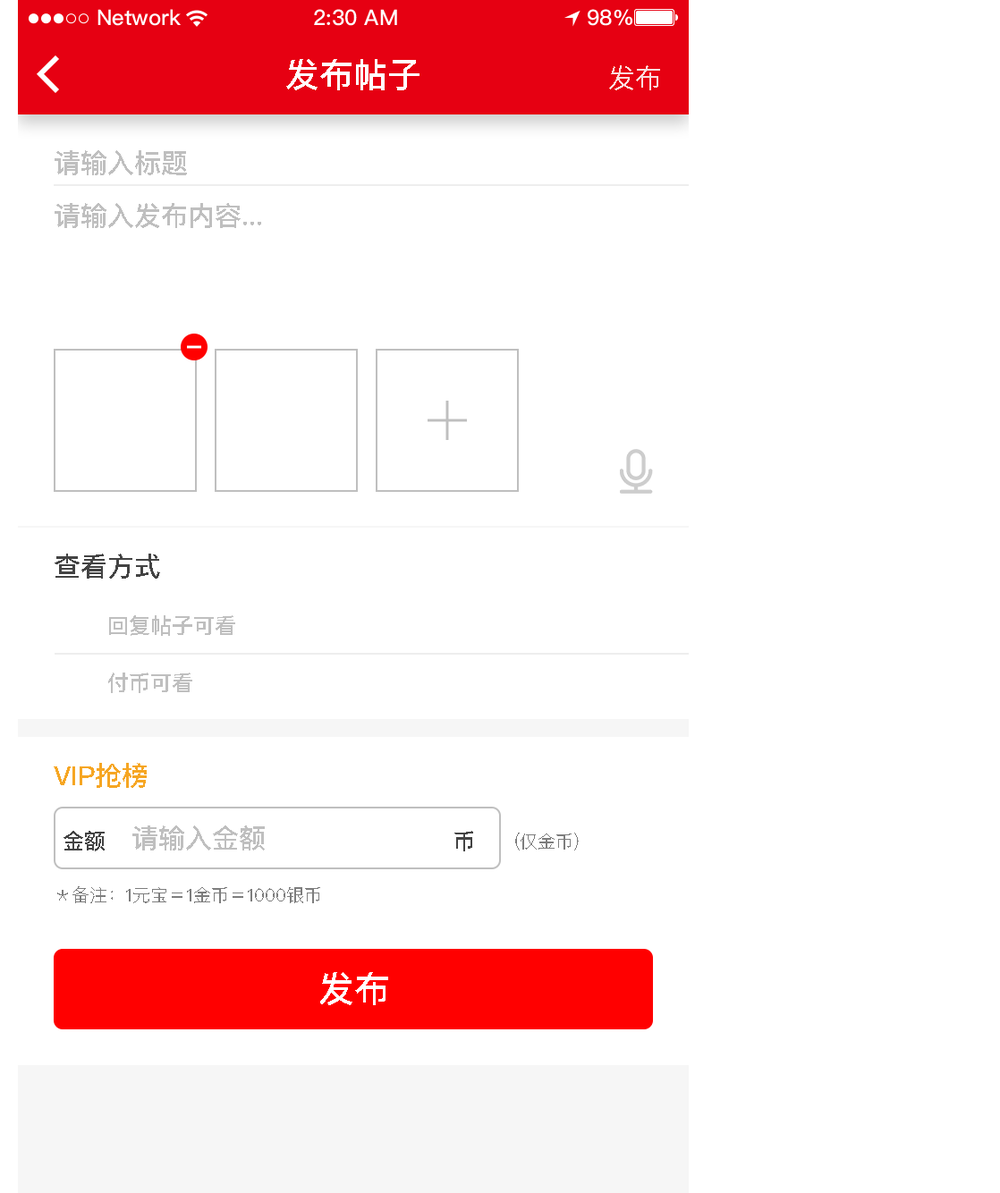
<style>
.page{position:relative;width:1000px;height:1193px;background:#ffffff}
.page>*{position:absolute;margin:0}
.t1{font:34px "PingFangSC-Medium";color:#ffffff;text-transform:uppercase}
.t2{font:26.8px "PingFangSC-Regular";color:#faddde;text-transform:uppercase}
.t3{font:26.8px "PingFangSC-Medium";color:#bfbfbf;text-transform:uppercase}
.t4{font:26.8px "PingFangSC-Medium";color:#434343;text-transform:uppercase}
.t5{font:21.5px "PingFangSC-Medium";color:#bfbfbf;text-transform:uppercase}
.t6{font:26.8px "PingFangSC-Medium";color:#f6a623;text-transform:uppercase}
.t7{font:21.5px "PingFangSC-Medium";color:#434343;text-transform:uppercase}
.t8{font:17.9px "PingFangSC-Regular";color:#7d7d7d;text-transform:uppercase}
.t9{font:35.8px "PingFangSC-Medium";color:#ffffff;text-transform:uppercase}
</style>
<div class="page">
<p class="t1" style="left:286px;top:59px;width:133px;height:31px">发布帖子</p>
<p class="t2" style="left:609px;top:65px;width:51px;height:25px">发布</p>
<p class="t3" style="left:55px;top:150px;width:132px;height:25px">请输入标题</p>
<p class="t3" style="left:55px;top:203px;width:206px;height:25px">请输入发布内容...</p>
<p class="t4" style="left:55px;top:553px;width:105px;height:26px">查看方式</p>
<p class="t5" style="left:109px;top:615px;width:126px;height:21px">回复帖子可看</p>
<p class="t5" style="left:108px;top:672px;width:84px;height:21px">付币可看</p>
<p class="t6" style="left:54px;top:763px;width:93px;height:25px">vip抢榜</p>
<p class="t7" style="left:63px;top:831px;width:42px;height:20px">金额</p>
<p class="t3" style="left:132px;top:825px;width:133px;height:25px">请输入金额</p>
<p class="t7" style="left:454px;top:831px;width:19px;height:20px">币</p>
<p class="t8" style="left:515px;top:832px;width:64px;height:18px">(仅金币)</p>
<p class="t8" style="left:57px;top:886px;width:263px;height:17px">＊备注：1元宝＝1金币＝1000银币</p>
<p class="t9" style="left:320px;top:972px;width:68px;height:33px">发布</p>
</div>
